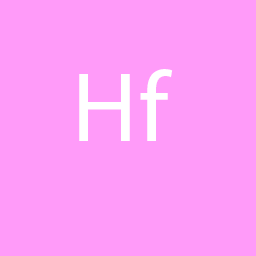
<style>
.page{position:relative;width:256px;height:256px;background:#ff9bf9}
.page>*{position:absolute;margin:0}
.t1{font:100px "MyriadPro-Regular";color:#ffffff}
</style>
<div class="page">
<p class="t1" style="left:79px;top:69px;width:94px;height:72px">Hf</p>
</div>
